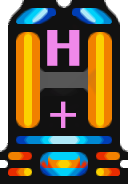
<style>
.page{position:relative;width:128px;height:184px;background:#111111}
.page>*{position:absolute;margin:0}
.t1{font:48px "RetroGaming";color:#f088ea;font-weight:bold}
.t2{font:48px "MyriadPro-Regular";color:#f088ea;font-weight:bold}
</style>
<div class="page">
<p class="t1" style="left:47px;top:30px;width:33px;height:36px">H</p>
<p class="t2" style="left:50px;top:101px;width:26px;height:27px">+</p>
</div>
